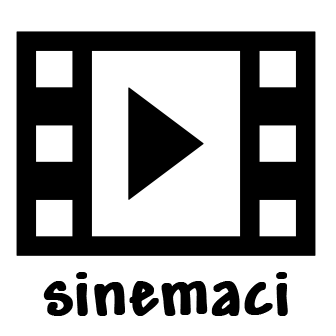
<style>
.page{position:relative;width:336px;height:336px;background:#ffffff}
.page>*{position:absolute;margin:0}
.t1{font:73.8px "Andy-Bold";color:#000000;font-weight:bold}
</style>
<div class="page">
<p class="t1" style="left:43px;top:272px;width:245px;height:44px">sinemaci</p>
</div>
